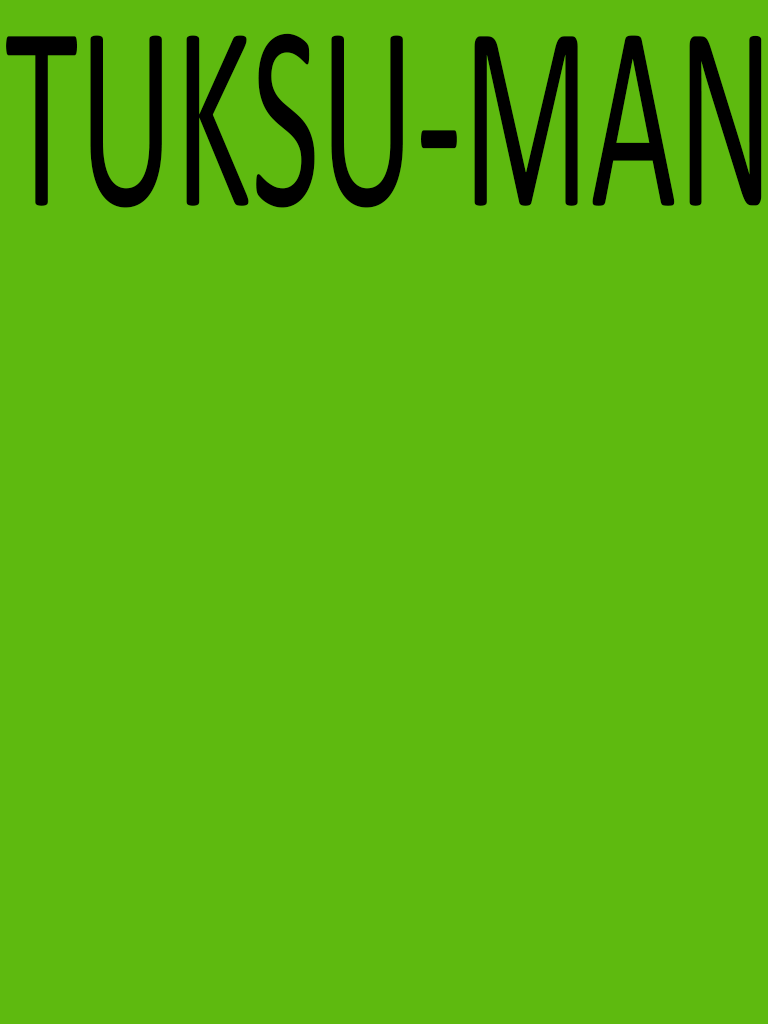
<style>
.page{position:relative;width:768px;height:1024px;background:#5eba0f}
.page>*{position:absolute;margin:0}
.t1{font:266.7px "Calibri";color:#000000;scale:0.56 1}
</style>
<div class="page">
<p class="t1" style="left:6px;top:33px;width:756px;height:175px">TUKSU-MAN</p>
</div>
